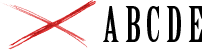
<style>
.page{position:relative;width:213px;height:50px;background:#ffffff}
.page>*{position:absolute;margin:0}
.t1{font:48px "BirchStd";color:#000000}
</style>
<div class="page">
<p class="t1" style="left:103px;top:6px;width:99px;height:36px">A B C D E</p>
</div>
